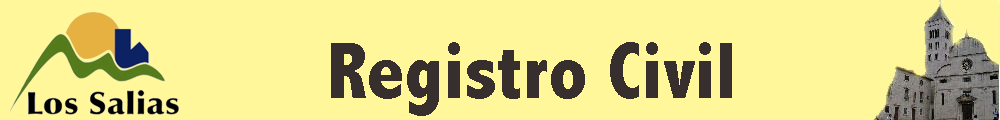
<style>
.page{position:relative;width:1000px;height:120px;background:#fff79a}
.page>*{position:absolute;margin:0}
.t1{font:80px "AbadiMT-CondensedExtraBold";color:#362f2d}
.t2{font:72px "ArialMT";color:#362f2d}
</style>
<div class="page">
<p class="t1" style="left:331px;top:42px;width:401px;height:74px"><span class="t2"><br></span>Registro Civil</p>
</div>
